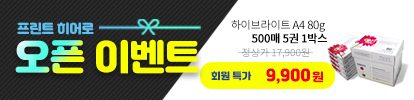
<style>
.page{position:relative;width:414px;height:100px;background:#ffffff}
.page>*{position:absolute;margin:0}
.t1{font:12.4px "Jalnan";letter-spacing:-0.025em;color:#5ec0ee}
.t2{font:11.1px "NotoSansCJKkr-Regular";letter-spacing:-0.025em;color:#000000}
.t3{font:11.1px "NotoSansCJKkr-Bold";letter-spacing:-0.025em;color:#000000}
.t4{font:35.6px "Jalnan";letter-spacing:-0.025em;color:#f9ff00}
.t5{font:9.8px "NotoSansCJKkr-Regular";letter-spacing:-0.025em;color:#a2a2a2;scale:1.05 1}
.t6{font:9.4px "Jalnan";letter-spacing:-0.025em;color:#204586}
.t7{font:16.1px "Jalnan";letter-spacing:-0.025em;color:#f6001f}
.t8{font:11.6px "Jalnan";letter-spacing:-0.025em;color:#f6001f}
</style>
<div class="page">
<p class="t1" style="left:17px;top:22px;width:77px;height:13px">프린트 히어로</p>
<p class="t2" style="left:231px;top:19px;width:96px;height:25px;text-align:right">하이브라이트 A4 80g <br><span class="t3">500매 5권 1박스</span></p>
<p class="t4" style="left:15px;top:39px;width:184px;height:35px">오픈 이벤트</p>
<p class="t5" style="left:242px;top:48px;width:67px;height:10px">정상가 17,900원</p>
<p class="t6" style="left:211px;top:71px;width:41px;height:10px">회원 특가</p>
<p class="t7" style="left:266px;top:68px;width:58px;height:16px">9,900<span class="t8">원</span></p>
</div>
